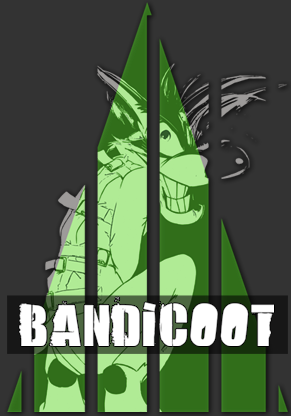
<style>
.page{position:relative;width:291px;height:416px;background:#333333}
.page>*{position:absolute;margin:0}
.t1{font:64.2px "84Rock!";letter-spacing:0.05em;color:#ffffff}
</style>
<div class="page">
<p class="t1" style="left:19px;top:297px;width:255px;height:49px">BANDICOOT</p>
</div>
